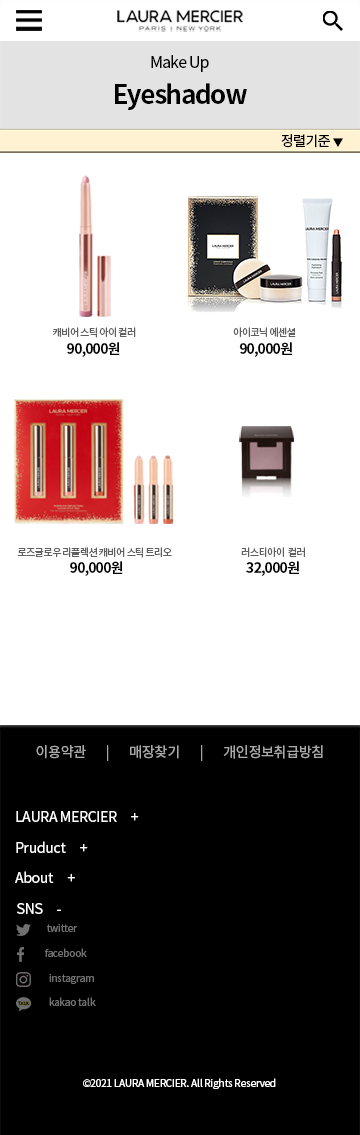
<style>
.page{position:relative;width:360px;height:1135px;background:#ffffff}
.page>*{position:absolute;margin:0}
.t1{font:16px "NotoSansCJKkr-Regular";letter-spacing:-0.055em;color:#000000}
.t2{font:26px "NotoSansCJKkr-Bold";letter-spacing:-0.055em;color:#000000}
.t3{font:14px "NotoSansCJKkr-Regular";letter-spacing:-0.055em;color:#000000}
.t4{font:10px "NotoSansCJKkr-Regular";letter-spacing:-0.055em;color:#000000}
.t5{font:10px "NotoSansCJKkr-Regular";letter-spacing:-0.055em;color:#5f5f5f}
.t6{font:14px "NotoSansCJKkr-Bold";letter-spacing:-0.055em;color:#000000}
.t7{font:14px "NotoSansCJKkr-Regular";letter-spacing:-0.02em;color:#a8a8a8}
.t8{font:14px "NotoSansCJKkr-Regular";letter-spacing:-0.02em;color:#ffffff}
.t9{font:10px "NotoSansCJKkr-Regular";letter-spacing:-0.02em;color:#6f706f}
.t10{font:10px "NotoSansCJKkr-Regular";letter-spacing:-0.02em;color:#ffffff}
</style>
<div class="page">
<p class="t1" style="left:151px;top:55px;width:58px;height:17px">Make Up</p>
<p class="t2" style="left:115px;top:83px;width:132px;height:27px">Eyeshadow</p>
<p class="t3" style="left:281px;top:134px;width:62px;height:14px">정렬기준 <span class="t4">▼</span></p>
<p class="t5" style="left:53px;top:327px;width:83px;height:11px">캐비어 스틱 아이 컬러</p>
<p class="t5" style="left:233px;top:327px;width:63px;height:10px">아이코닉 에센셜</p>
<p class="t6" style="left:67px;top:342px;width:53px;height:15px">90,000원</p>
<p class="t6" style="left:239px;top:342px;width:53px;height:15px">90,000원</p>
<p class="t5" style="left:17px;top:547px;width:155px;height:11px">로즈글로우 리플렉션 캐비어 스틱 트리오</p>
<p class="t5" style="left:241px;top:547px;width:64px;height:10px">러스티아이  컬러</p>
<p class="t6" style="left:70px;top:561px;width:53px;height:15px">90,000원</p>
<p class="t6" style="left:246px;top:561px;width:53px;height:15px">32,000원</p>
<p class="t7" style="left:36px;top:745px;width:287px;height:16px">이용약관       |       매장찾기       |       개인정보취급방침</p>
<p class="t8" style="left:16px;top:811px;width:123px;height:11px">LAURA MERCIER     +</p>
<p class="t8" style="left:16px;top:841px;width:72px;height:12px">Pruduct     +</p>
<p class="t8" style="left:15px;top:871px;width:60px;height:12px">About     +</p>
<p class="t8" style="left:17px;top:903px;width:44px;height:11px">SNS     -</p>
<p class="t9" style="left:47px;top:924px;width:30px;height:8px">twitter</p>
<p class="t9" style="left:45px;top:948px;width:42px;height:9px">facebook</p>
<p class="t9" style="left:49px;top:974px;width:45px;height:10px">instagram</p>
<p class="t9" style="left:49px;top:997px;width:47px;height:9px">kakao talk</p>
<p class="t10" style="left:83px;top:1078px;width:193px;height:11px">©2021 LAURA MERCIER. All Rights Reserved</p>
</div>
